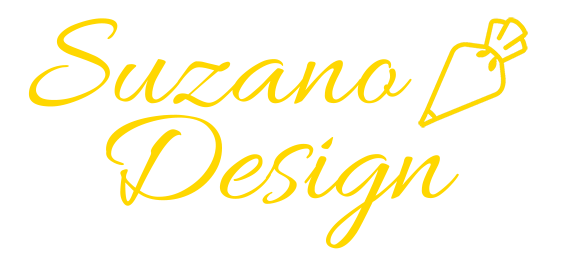
<style>
.page{position:relative;width:565px;height:274px;background:#ffffff}
.page>*{position:absolute;margin:0}
.t1{font:140px "Allura-Regular";color:#ffd700}
</style>
<div class="page">
<p class="t1" style="left:28px;top:18px;width:384px;height:90px">Suzano</p>
<p class="t1" style="left:106px;top:114px;width:353px;height:135px">Design</p>
</div>
